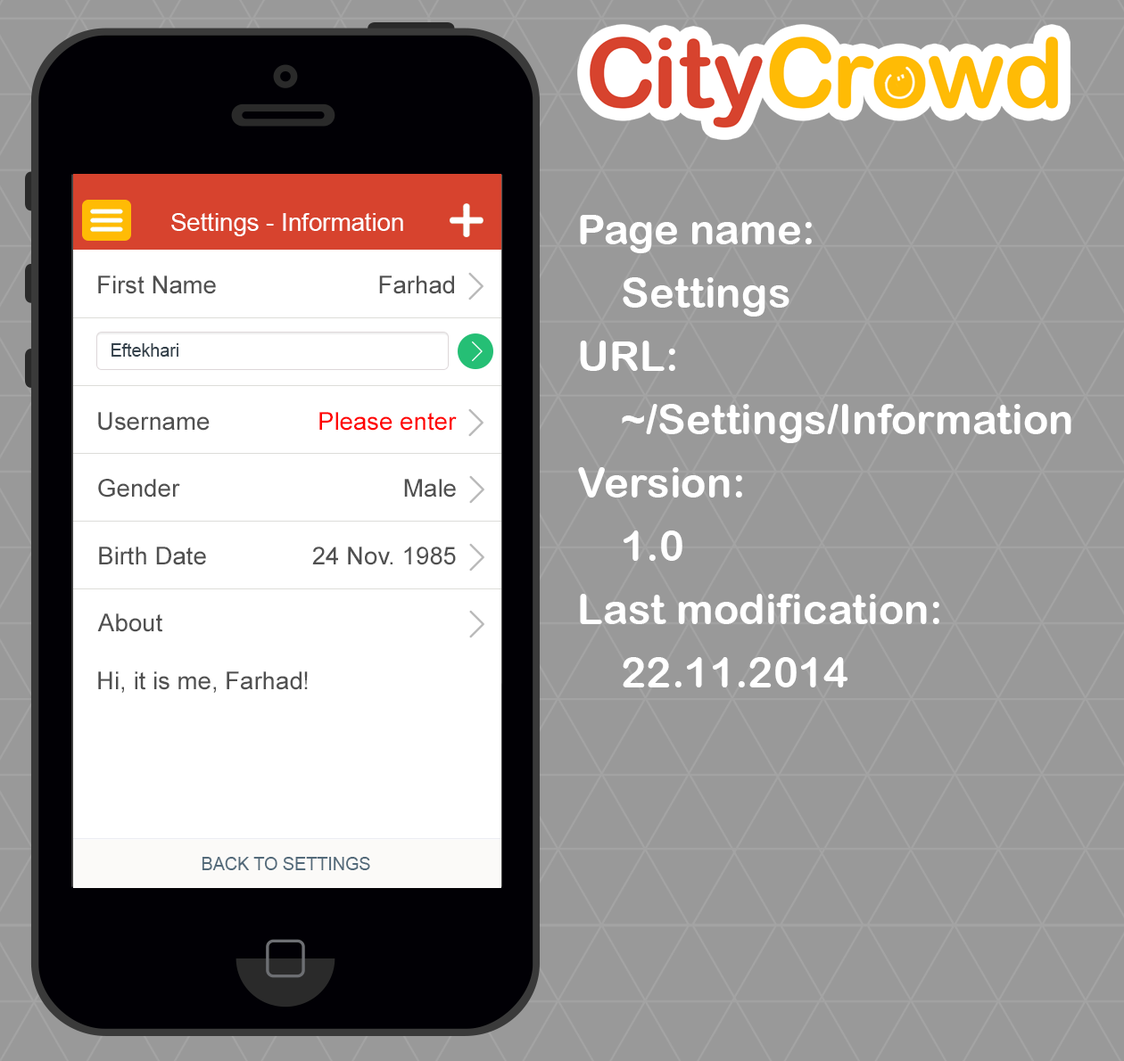
<style>
.page{position:relative;width:1124px;height:1061px;background:#999999}
.page>*{position:absolute;margin:0}
.t1{font:24.6px "ArialMT";color:#ffffff}
.t2{font:42.2px/63.3px "ArialRoundedMTBold";color:#ffffff}
.t3{font:24.6px "ArialMT";color:#505050}
.t4{font:17.6px "ArialMT";color:#34414b}
.t5{font:24.6px "ArialMT";color:#ff0000}
.t6{font:17.6px "ArialMT";color:#536a7a}
</style>
<div class="page">
<p class="t1" style="left:171px;top:213px;width:232px;height:23px">Settings - Information</p>
<p class="t2" style="left:578px;top:215px;width:493px;height:473px">Page name:<br>Settings<br>URL:<br>~/Settings/Information<br>Version:<br>1.0<br>Last modification:<br>22.11.2014</p>
<p class="t3" style="left:98px;top:276px;width:118px;height:18px">First Name</p>
<p class="t3" style="left:379px;top:276px;width:75px;height:18px">Farhad</p>
<p class="t4" style="left:111px;top:343px;width:67px;height:14px">Eftekhari</p>
<p class="t3" style="left:98px;top:412px;width:112px;height:19px">Username</p>
<p class="t5" style="left:319px;top:412px;width:138px;height:19px">Please enter</p>
<p class="t3" style="left:98px;top:479px;width:82px;height:19px">Gender</p>
<p class="t3" style="left:404px;top:479px;width:52px;height:19px">Male</p>
<p class="t3" style="left:99px;top:547px;width:107px;height:18px">Birth Date</p>
<p class="t3" style="left:312px;top:547px;width:144px;height:18px">24 Nov. 1985</p>
<p class="t3" style="left:97px;top:614px;width:65px;height:18px">About</p>
<p class="t3" style="left:98px;top:672px;width:210px;height:21px">Hi, it is me, Farhad!</p>
<p class="t6" style="left:202px;top:857px;width:168px;height:13px">BACK TO SETTINGS</p>
</div>
